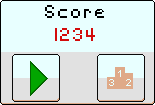
<style>
.page{position:relative;width:155px;height:105px;background:#e8ffff}
.page>*{position:absolute;margin:0}
.t1{font:18px "SFPixelate";color:#000000}
.t2{font:18px "SFPixelate";color:#d30b0b}
</style>
<div class="page">
<p class="t1" style="left:45px;top:5px;width:59px;height:13px">Score</p>
<p class="t2" style="left:55px;top:28px;width:40px;height:13px">1234</p>
</div>
